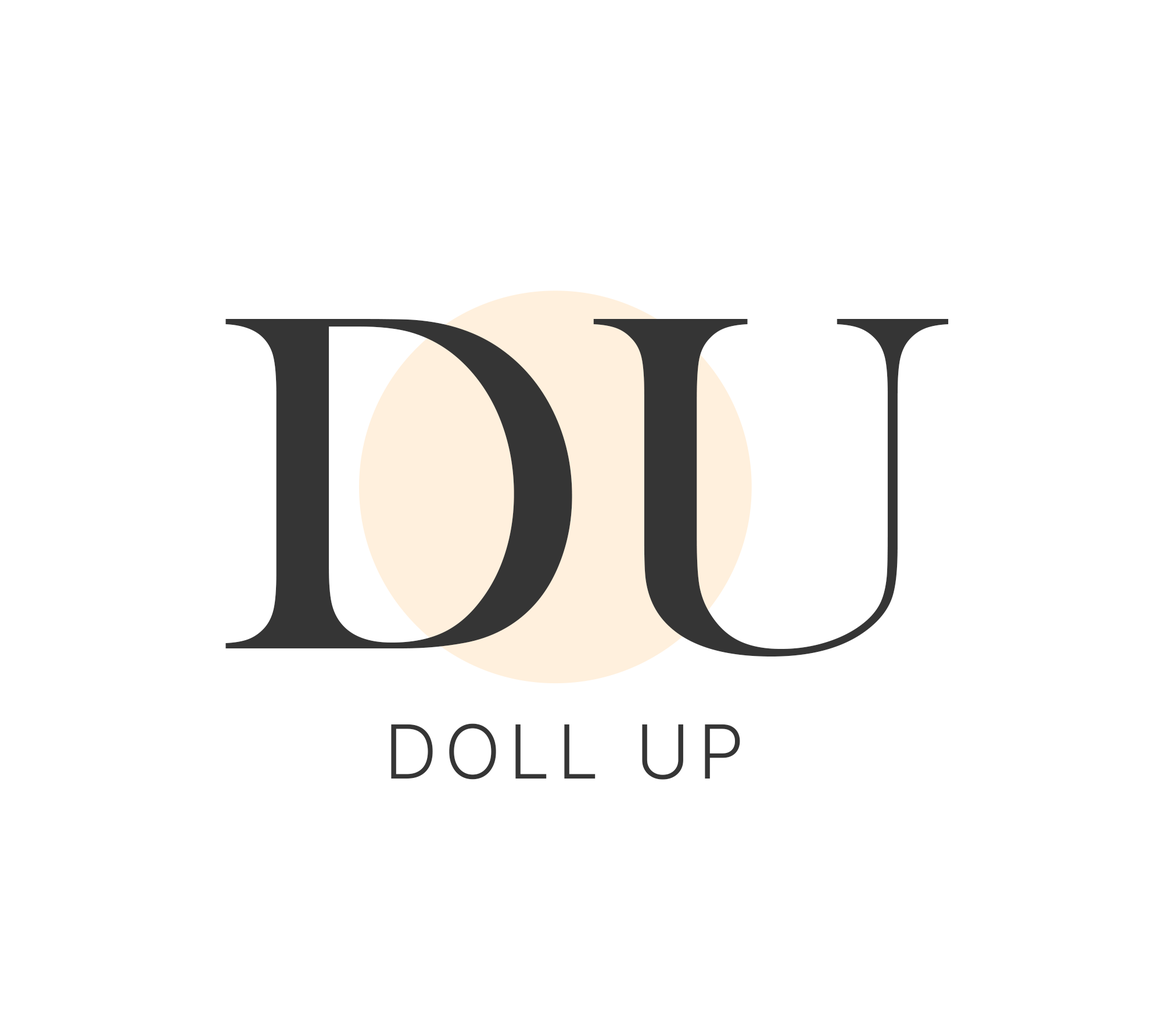
<style>
.page{position:relative;width:1162px;height:1026px;background:#ffffff}
.page>*{position:absolute;margin:0}
.t1{font:494px "BaskOldFace";letter-spacing:-0.02em;color:#353535}
.t2{font:74.3px "Inter-Light";letter-spacing:0.1em;color:#353535}
</style>
<div class="page">
<p class="t1" style="left:225px;top:319px;width:724px;height:338px">DU</p>
<p class="t2" style="left:391px;top:723px;width:349px;height:57px">DOLL UP</p>
</div>
